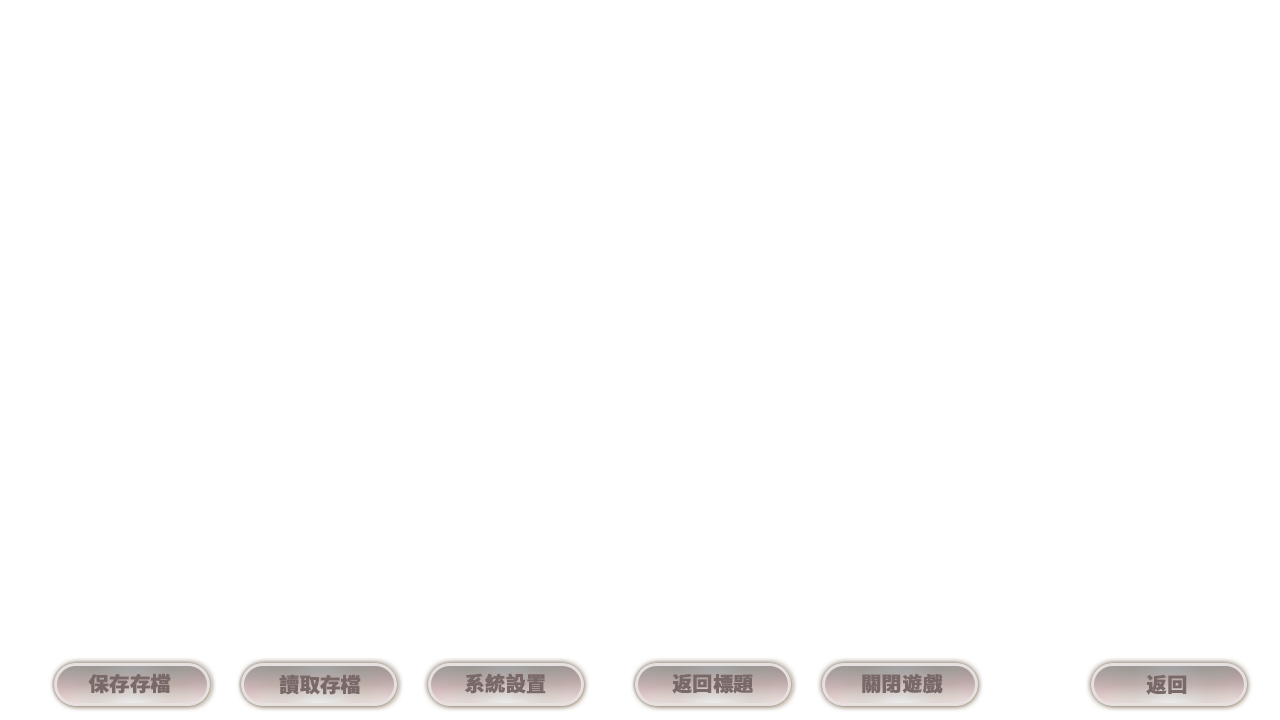
<style>
.page{position:relative;width:1280px;height:720px;background:#ffffff}
.page>*{position:absolute;margin:0}
.t1{font:20px "SourceHanSansCN-Heavy";color:#796969;font-weight:bold}
</style>
<div class="page">
<p class="t1" style="left:88px;top:673px;width:83px;height:21px">保存存檔</p>
<p class="t1" style="left:279px;top:674px;width:82px;height:21px">讀取存檔</p>
<p class="t1" style="left:464px;top:673px;width:82px;height:21px">系統設置</p>
<p class="t1" style="left:672px;top:673px;width:81px;height:21px">返回標題</p>
<p class="t1" style="left:862px;top:673px;width:81px;height:21px">關閉遊戲</p>
<p class="t1" style="left:1146px;top:674px;width:41px;height:21px">返回</p>
</div>
